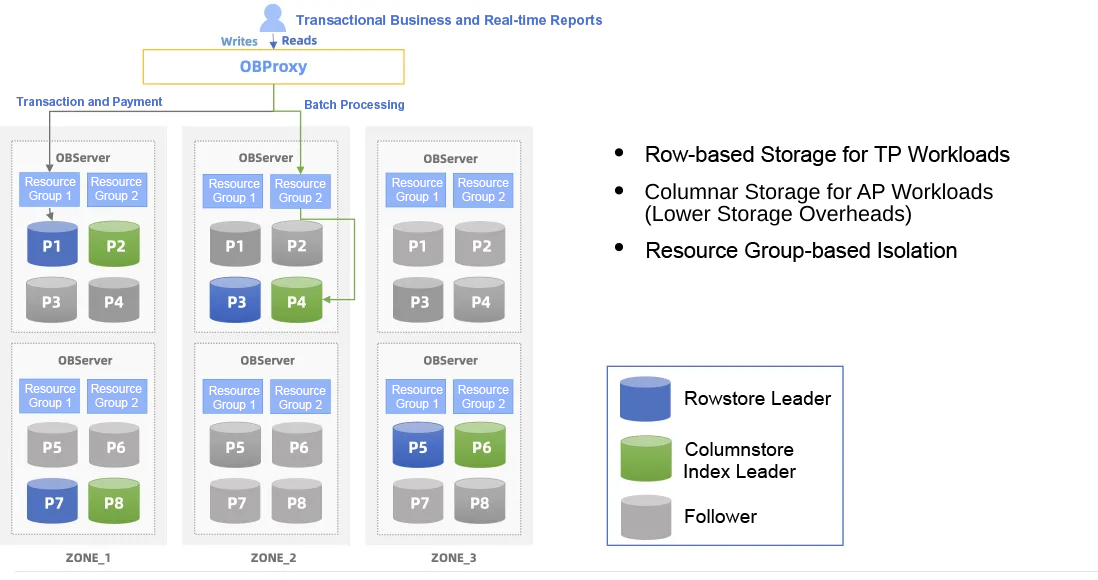
<style>
.page{position:relative;width:1098px;height:580px;background:#ffffff}
.page>*{position:absolute;margin:0}
.t1{font:13.9px "Arial-BoldMT";color:#4e72be}
.t2{font:12px "Arial-BoldMT";color:#4e72be}
.t3{font:21.7px "ArialMT";color:#000000}
.t4{font:12px/13.9px "ArialMT";color:#ffffff}
.t5{font:21.7px/22.4px "ArialMT";color:#000000}
.t6{font:19.3px "ArialMT";color:#000000}
.t7{font:19.3px/22px "ArialMT";color:#000000}
</style>
<div class="page">
<p class="t1" style="left:296px;top:14px;width:307px;height:14px">Transactional Business and Real-time Reports</p>
<p class="t2" style="left:16px;top:96px;width:147px;height:12px">Transaction and Payment</p>
<p class="t2" style="left:305px;top:99px;width:99px;height:12px">Batch Processing</p>
<p class="t3" style="left:646px;top:146px;width:364px;height:20px">Row-based Storage for TP Workloads</p>
<p class="t4" style="left:25px;top:177px;width:51px;height:25px;text-align:center">Resource<br>Group 1</p>
<p class="t4" style="left:91px;top:177px;width:51px;height:25px;text-align:center">Resource<br>Group 2</p>
<p class="t4" style="left:209px;top:179px;width:51px;height:25px;text-align:center">Resource<br>Group 1</p>
<p class="t4" style="left:275px;top:179px;width:51px;height:25px;text-align:center">Resource<br>Group 2</p>
<p class="t4" style="left:392px;top:178px;width:51px;height:25px;text-align:center">Resource<br>Group 1</p>
<p class="t4" style="left:458px;top:178px;width:51px;height:25px;text-align:center">Resource<br>Group 2</p>
<p class="t5" style="left:645px;top:183px;width:348px;height:43px">Columnar Storage for AP Workloads<br>(Lower Storage Overheads)</p>
<p class="t3" style="left:647px;top:242px;width:310px;height:20px">Resource Group-based Isolation</p>
<p class="t4" style="left:25px;top:384px;width:51px;height:25px;text-align:center">Resource<br>Group 1</p>
<p class="t4" style="left:91px;top:384px;width:51px;height:25px;text-align:center">Resource<br>Group 2</p>
<p class="t4" style="left:209px;top:386px;width:51px;height:25px;text-align:center">Resource<br>Group 1</p>
<p class="t4" style="left:275px;top:386px;width:51px;height:25px;text-align:center">Resource<br>Group 2</p>
<p class="t4" style="left:392px;top:385px;width:51px;height:25px;text-align:center">Resource<br>Group 1</p>
<p class="t4" style="left:458px;top:385px;width:51px;height:25px;text-align:center">Resource<br>Group 2</p>
<p class="t6" style="left:685px;top:391px;width:147px;height:14px">Rowstore Leader</p>
<p class="t7" style="left:684px;top:442px;width:112px;height:36px;text-align:center">Columnstore<br>Index Leader</p>
<p class="t6" style="left:685px;top:509px;width:72px;height:14px">Follower</p>
</div>
